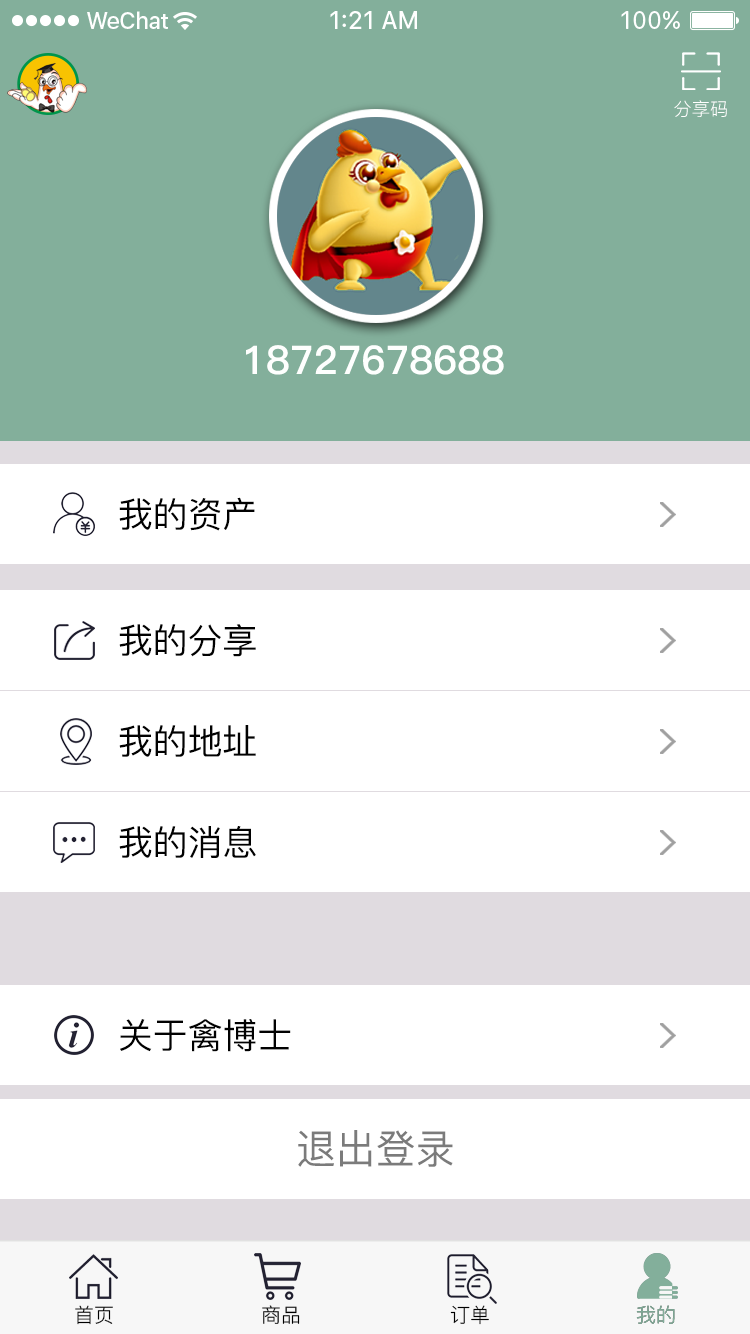
<style>
.page{position:relative;width:750px;height:1334px;background:#ffffff}
.page>*{position:absolute;margin:0}
.t1{font:18.3px "PingFang-SC-Regular";color:#ffffff;text-transform:uppercase}
.t2{font:39.7px "PingFang-SC-Heavy";color:#fefffe;text-transform:uppercase}
.t3{font:35px "PingFang-SC-Medium";color:#010101;text-transform:uppercase}
.t4{font:40px "PingFang-SC-Medium";color:#7b7b7b;text-transform:uppercase}
.t5{font:20px "PingFang-SC-Regular";color:#000000;text-transform:uppercase}
.t6{font:20px "PingFang-SC-Regular";color:#83af9b;text-transform:uppercase}
</style>
<div class="page">
<p class="t1" style="left:674px;top:100px;width:53px;height:17px">分享码</p>
<p class="t2" style="left:246px;top:345px;width:258px;height:30px">18727678688</p>
<p class="t3" style="left:119px;top:497px;width:136px;height:34px">我的资产</p>
<p class="t3" style="left:119px;top:624px;width:137px;height:33px">我的分享</p>
<p class="t3" style="left:119px;top:725px;width:137px;height:32px">我的地址</p>
<p class="t3" style="left:119px;top:826px;width:137px;height:32px">我的消息</p>
<p class="t3" style="left:120px;top:1019px;width:171px;height:33px">关于禽博士</p>
<p class="t4" style="left:298px;top:1130px;width:155px;height:37px">退出登录</p>
<p class="t5" style="left:75px;top:1305px;width:38px;height:20px">首页</p>
<p class="t5" style="left:262px;top:1305px;width:38px;height:19px">商品</p>
<p class="t5" style="left:450px;top:1305px;width:39px;height:20px">订单</p>
<p class="t6" style="left:636px;top:1305px;width:39px;height:19px">我的</p>
<p class="t6" style="left:636px;top:1305px;width:39px;height:19px">我的</p>
</div>
